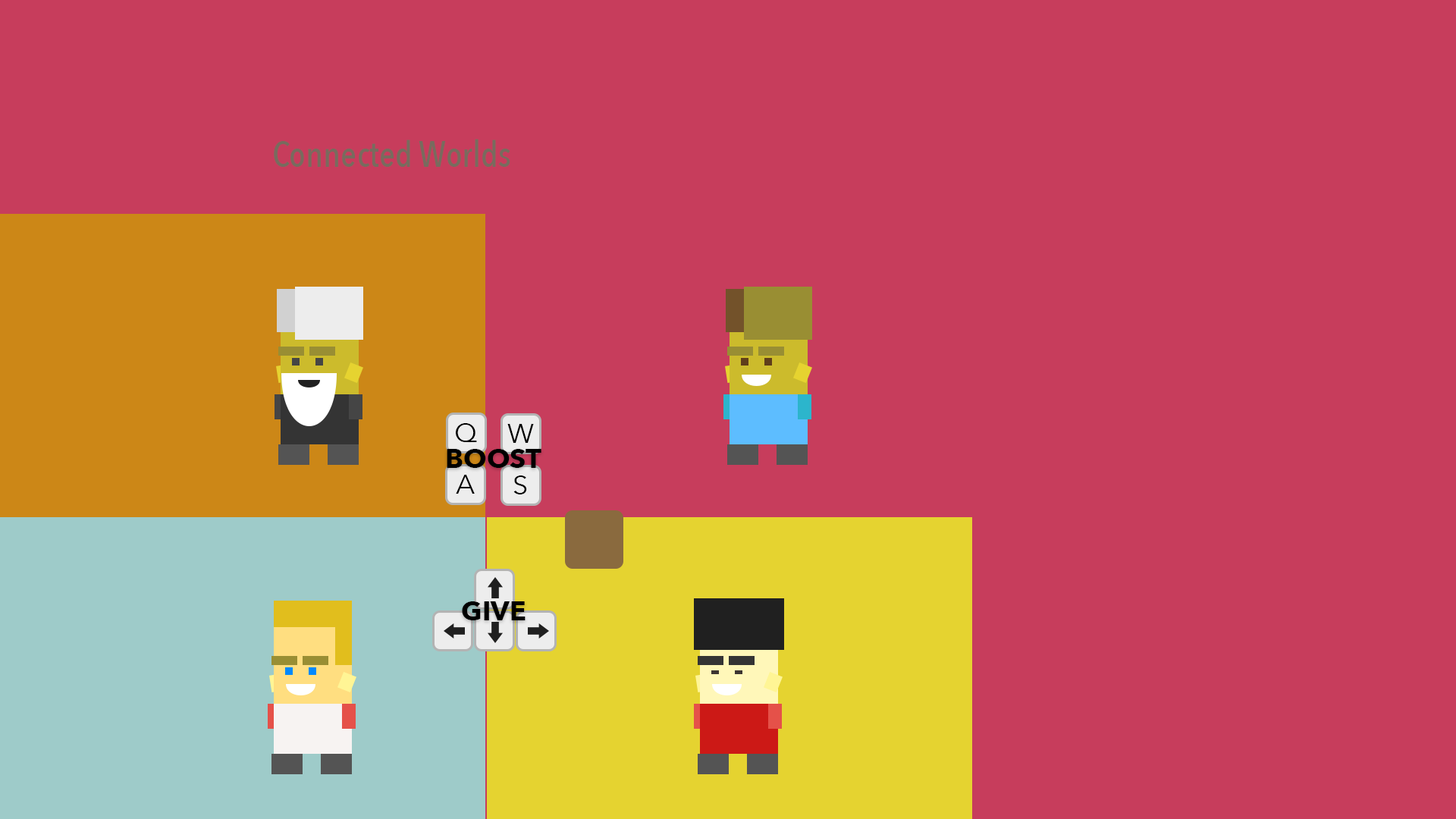
<style>
.page{position:relative;width:1456px;height:819px;background:#c73d5c}
.page>*{position:absolute;margin:0}
.t1{font:36.4px "AvenirNextCondensed-Medium";color:#786b5e}
.t2{font:27.1px "AvenirNext-Regular";color:#000000}
.t3{font:27.1px "AvenirNext-Bold";color:#000000}
</style>
<div class="page">
<p class="t1" style="left:274px;top:139px;width:236px;height:28px">Connected Worlds</p>
<p class="t2" style="left:456px;top:423px;width:21px;height:19px">Q</p>
<p class="t2" style="left:507px;top:424px;width:27px;height:19px">W</p>
<p class="t3" style="left:447px;top:449px;width:94px;height:19px">BOOST</p>
<p class="t2" style="left:456px;top:475px;width:19px;height:19px">A</p>
<p class="t2" style="left:513px;top:475px;width:14px;height:19px">S</p>
<p class="t3" style="left:462px;top:601px;width:64px;height:19px">GIVE</p>
</div>
